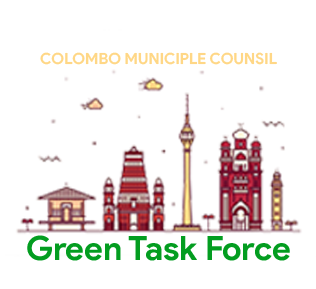
<style>
.page{position:relative;width:316px;height:289px;background:#ffffff}
.page>*{position:absolute;margin:0}
.t1{font:15.6px "ProductSans-Bold";color:#ffd786}
.t2{font:33.6px "ProductSans-Bold";color:#039d20}
</style>
<div class="page">
<p class="t1" style="left:40px;top:52px;width:237px;height:13px">COLOMBO MUNICIPLE COUNSIL</p>
<p class="t2" style="left:27px;top:235px;width:263px;height:26px">Green Task Force</p>
</div>
